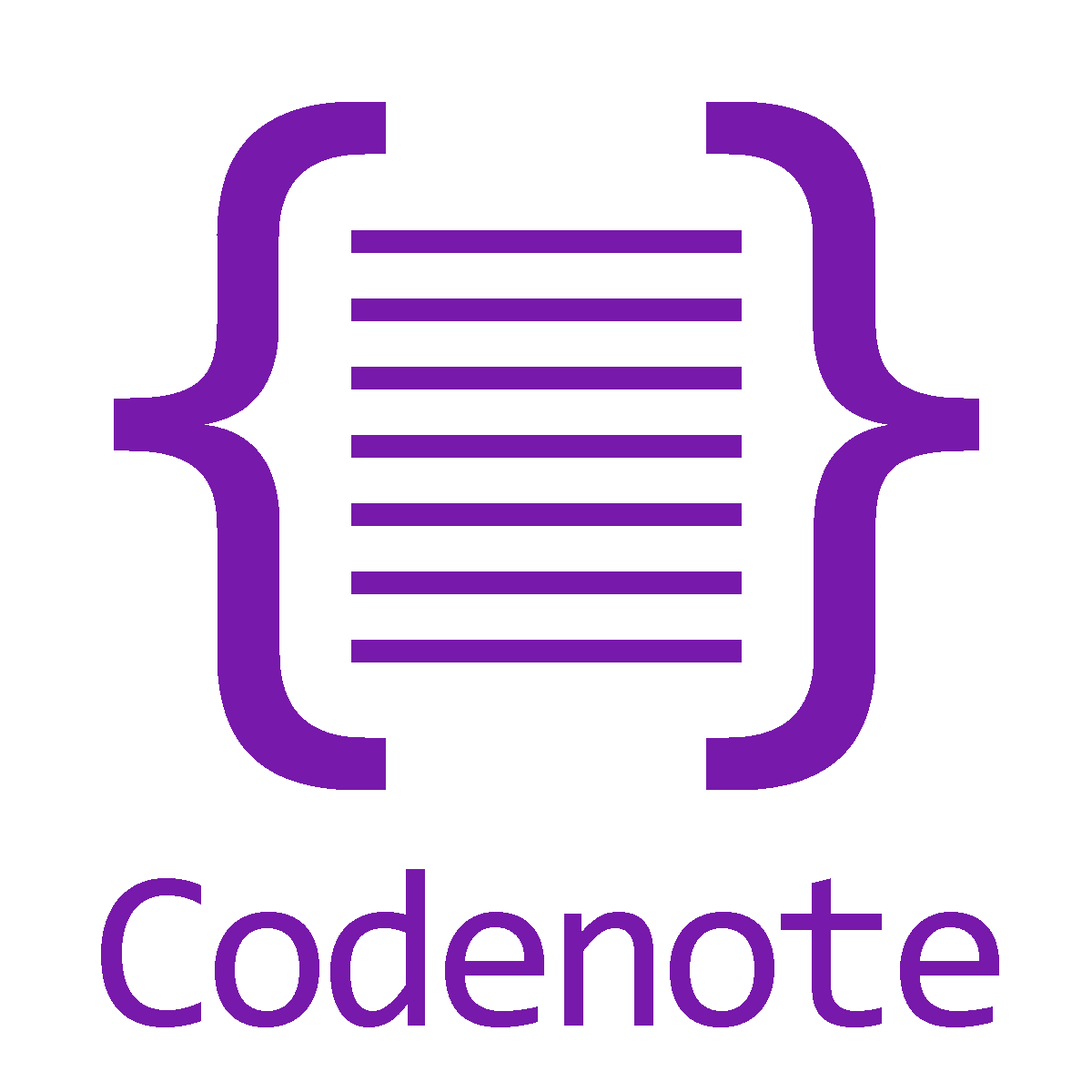
<style>
.page{position:relative;width:1092px;height:1092px;background:#ffffff}
.page>*{position:absolute;margin:0}
.t1{font:758.3px "Consolas";letter-spacing:0.2em;color:#7719aa}
.t2{font:227.5px "Consolas";letter-spacing:-0.05em;color:#7719aa}
</style>
<div class="page">
<p class="t1" style="left:114px;top:102px;width:865px;height:688px">{}</p>
<p class="t2" style="left:101px;top:869px;width:898px;height:158px">Codenote</p>
</div>
